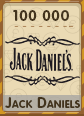
<style>
.page{position:relative;width:84px;height:116px;background:#eadab4}
.page>*{position:absolute;margin:0}
.t1{font:15px "RotondaC-Bold";letter-spacing:0.04em;color:#43341d;text-transform:uppercase}
.t2{font:15px "RotondaC-Bold";letter-spacing:0.03em;color:#43341d;font-variant:small-caps}
.t3{font:15px "RotondaC-Bold";letter-spacing:0.03em;color:#43341d;text-transform:uppercase}
</style>
<div class="page">
<p class="t1" style="left:13px;top:10px;width:56px;height:11px">100 000</p>
<p class="t2" style="left:5px;top:97px;width:75px;height:11px"><span class="t3">J</span>ack Daniels</p>
</div>
